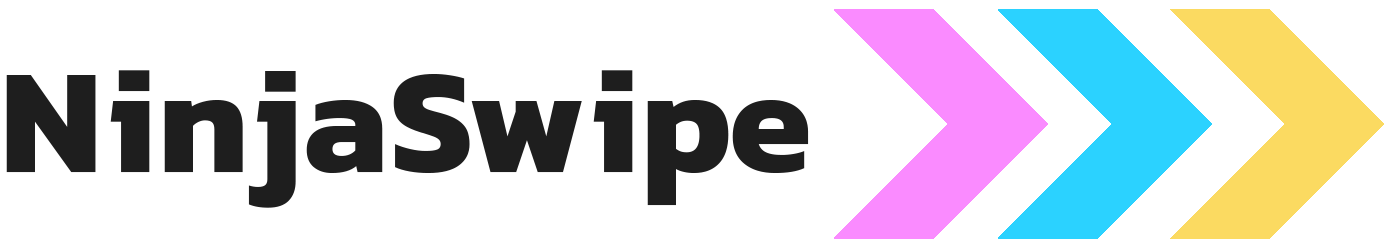
<style>
.page{position:relative;width:1384px;height:247px;background:#ffffff}
.page>*{position:absolute;margin:0}
.t1{font:150px "Kanit-Bold";letter-spacing:0.01em;color:#1e1e1e}
</style>
<div class="page">
<p class="t1" style="left:6px;top:70px;width:803px;height:138px">NinjaSwipe</p>
</div>
